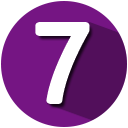
<style>
.page{position:relative;width:128px;height:128px;background:#751583}
.page>*{position:absolute;margin:0}
.t1{font:100px "MicrosoftYaHei";color:#ffffff}
</style>
<div class="page">
<p class="t1" style="left:38px;top:25px;width:49px;height:76px">7</p>
</div>
